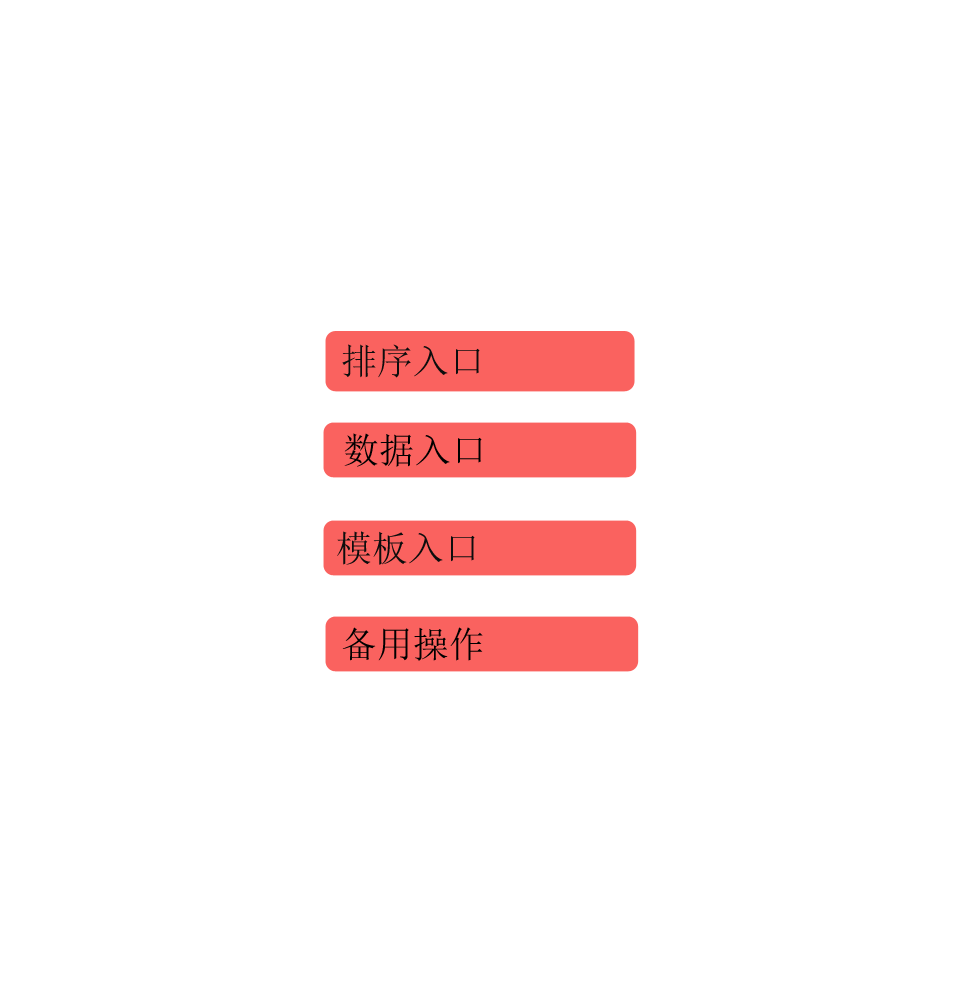
<style>
.page{position:relative;width:960px;height:1000px;background:#ffffff}
.page>*{position:absolute;margin:0}
.t1{font:36px "SimSun";color:#0d0d0d}
.t2{font:36px "SimSun";color:#000000}
</style>
<div class="page">
<p class="t1" style="left:342px;top:344px;width:138px;height:34px">排序入口</p>
<p class="t2" style="left:344px;top:433px;width:138px;height:34px">数据入口</p>
<p class="t1" style="left:337px;top:531px;width:138px;height:34px">模板入口</p>
<p class="t2" style="left:342px;top:627px;width:141px;height:34px">备用操作</p>
</div>
